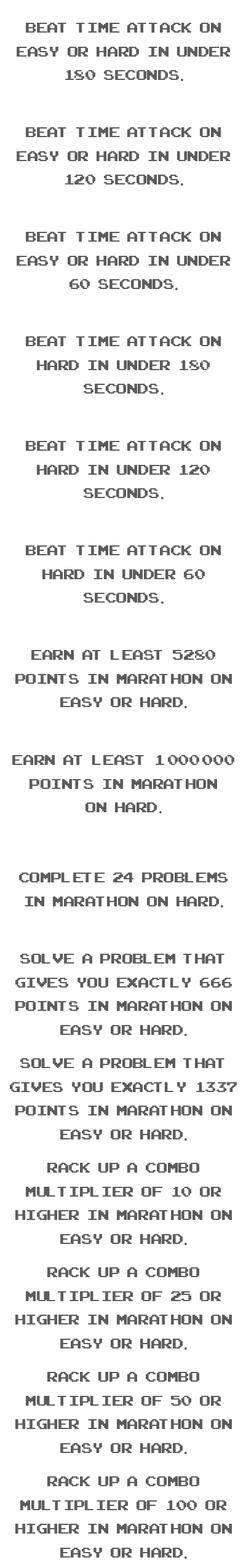
<style>
.page{position:relative;width:246px;height:1568px;background:#ffffff}
.page>*{position:absolute;margin:0}
.t1{font:19.7px "ArcadeClassic";color:#5c5c5c}
.t2{font:19.7px "MyriadPro-Regular";color:#5c5c5c}
</style>
<div class="page">
<p class="t1" style="left:17px;top:23px;width:213px;height:58px;text-align:center">beat   time   atTACK   ON   EASY   OR   HARD   IN   UNDER   180   SECONDS<span class="t2">.</span></p>
<p class="t1" style="left:17px;top:127px;width:213px;height:59px;text-align:center">beat   time   atTACK   ON   EASY   OR   HARD   IN   UNDER   120   SECONDS<span class="t2">.</span></p>
<p class="t1" style="left:17px;top:232px;width:213px;height:58px;text-align:center">beat   time   atTACK   ON   EASY   OR   HARD   IN   UNDER   60   SECONDS<span class="t2">.</span></p>
<p class="t1" style="left:26px;top:336px;width:195px;height:59px;text-align:center">beat   time   atTACK   ON   HARD   IN   UNDER   180   <br>SECONDS<span class="t2">.</span></p>
<p class="t1" style="left:26px;top:441px;width:195px;height:58px;text-align:center">beat   time   atTACK   ON   HARD   IN   UNDER   120   <br>SECONDS<span class="t2">.</span></p>
<p class="t1" style="left:26px;top:545px;width:195px;height:59px;text-align:center">beat   time   atTACK   ON   HARD   IN   UNDER   60   <br>SECONDS<span class="t2">.</span></p>
<p class="t1" style="left:15px;top:650px;width:217px;height:58px;text-align:center">EARN   AT   LEAST   5280   POINTS   IN   MARATHON   ON   EASY   OR   HARD<span class="t2">.</span></p>
<p class="t1" style="left:12px;top:755px;width:222px;height:59px;text-align:center">EARN   AT   LEAST   1 000 000   POINTS   IN   MARATHON   <br>ON   HARD<span class="t2">.</span></p>
<p class="t1" style="left:19px;top:873px;width:209px;height:35px;text-align:center">COMPLETE   24   PROBLEMS   IN   MARATHON   ON   HARD<span class="t2">.</span></p>
<p class="t1" style="left:15px;top:954px;width:217px;height:82px;text-align:center">Solve   a   problem   that   gives   you   exactly   666   points   in   marathon   on   easy   or   hard<span class="t2">.</span></p>
<p class="t1" style="left:10px;top:1058px;width:227px;height:83px;text-align:center">Solve   a   problem   that   gives   you   exactly   1337   points   in   marathon   on   easy   or   hard<span class="t2">.</span></p>
<p class="t1" style="left:15px;top:1163px;width:217px;height:82px;text-align:center">RACK   UP   A   COMBO<br>MULTIPLIER   OF   10   OR   HIGHER   IN   MARATHON   ON   EASY   OR   HARD<span class="t2">.</span></p>
<p class="t1" style="left:15px;top:1267px;width:217px;height:83px;text-align:center">RACK   UP   A   COMBO<br>MULTIPLIER   OF   25   OR   HIGHER   IN   MARATHON   ON   EASY   OR   HARD<span class="t2">.</span></p>
<p class="t1" style="left:15px;top:1372px;width:217px;height:82px;text-align:center">RACK   UP   A   COMBO<br>MULTIPLIER   OF   50   OR   HIGHER   IN   MARATHON   ON   EASY   OR   HARD<span class="t2">.</span></p>
<p class="t1" style="left:15px;top:1476px;width:217px;height:83px;text-align:center">RACK   UP   A   COMBO<br>MULTIPLIER   OF   100   OR   HIGHER   IN   MARATHON   ON   EASY   OR   HARD<span class="t2">.</span></p>
</div>
